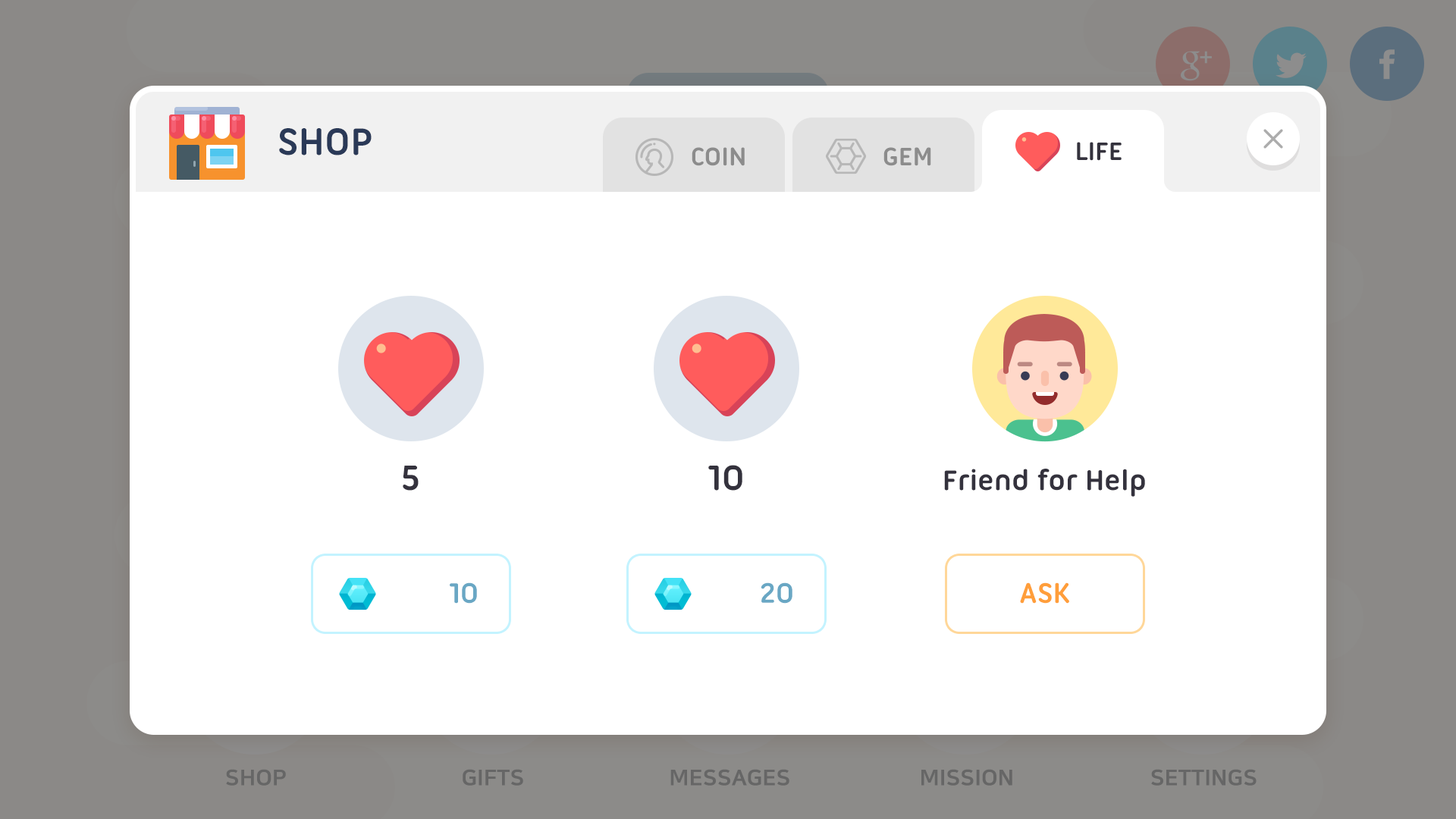
<style>
.page{position:relative;width:1456px;height:819px;background:#ffffff}
.page>*{position:absolute;margin:0}
.t1{font:40.9px "UbuntuTitling-Bold";color:#2a3957;text-transform:uppercase}
.t2{font:27.3px "UbuntuTitling-Bold";color:#8c8c8c;text-transform:uppercase}
.t3{font:27.3px "UbuntuTitling-Bold";color:#34323d;text-transform:uppercase}
.t4{font:37.9px "UbuntuTitling-Bold";color:#34323d;text-transform:uppercase}
.t5{font:30.3px "UbuntuTitling-Bold";color:#34323d}
.t6{font:30.3px "UbuntuTitling-Bold";color:#69a7c4;text-transform:uppercase}
.t7{font:30.3px "UbuntuTitling-Bold";color:#ff9e3a;text-transform:uppercase}
</style>
<div class="page">
<p class="t1" style="left:279px;top:128px;width:93px;height:27px">shop</p>
<p class="t2" style="left:692px;top:147px;width:53px;height:19px">coin</p>
<p class="t2" style="left:883px;top:147px;width:48px;height:19px">gem</p>
<p class="t3" style="left:1077px;top:142px;width:45px;height:19px">life</p>
<p class="t4" style="left:403px;top:466px;width:16px;height:25px">5</p>
<p class="t4" style="left:708px;top:465px;width:34px;height:26px">10</p>
<p class="t5" style="left:944px;top:469px;width:201px;height:28px">Friend for Help</p>
<p class="t6" style="left:450px;top:582px;width:27px;height:22px">10</p>
<p class="t6" style="left:761px;top:582px;width:31px;height:22px">20</p>
<p class="t7" style="left:1020px;top:582px;width:49px;height:22px">ask</p>
</div>
